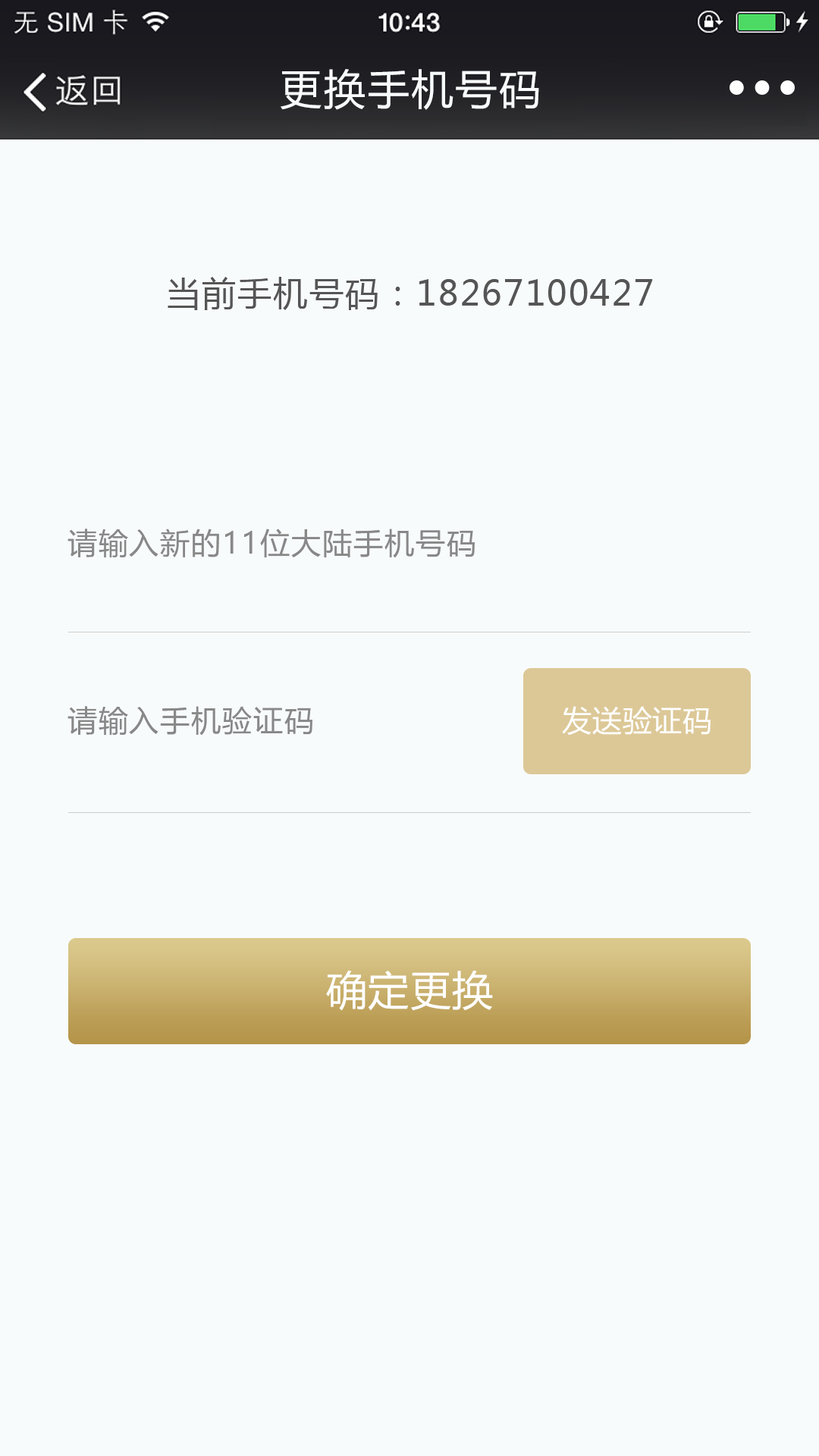
<style>
.page{position:relative;width:819px;height:1456px;background:#f8fbfc}
.page>*{position:absolute;margin:0}
.t1{font:41.7px "MicrosoftYaHei";letter-spacing:0.05em;color:#f8fbfc}
.t2{font:34.1px "MicrosoftYaHei";letter-spacing:0.05em;color:#555555}
.t3{font:29.6px "MicrosoftYaHei";letter-spacing:0.05em;color:#888888}
.t4{font:29.6px "MicrosoftYaHei";letter-spacing:0.025em;color:#ffffff}
.t5{font:40.9px "MicrosoftYaHei";letter-spacing:0.025em;color:#ffffff}
</style>
<div class="page">
<p class="t1" style="left:281px;top:69px;width:258px;height:41px">更换手机号码</p>
<p class="t2" style="left:168px;top:277px;width:485px;height:33px">当前手机号码：18267100427</p>
<p class="t3" style="left:67px;top:529px;width:408px;height:29px">请输入新的11位大陆手机号码</p>
<p class="t3" style="left:67px;top:706px;width:245px;height:30px">请输入手机验证码</p>
<p class="t4" style="left:562px;top:706px;width:149px;height:30px">发送验证码</p>
<p class="t5" style="left:326px;top:970px;width:167px;height:41px">确定更换</p>
</div>
